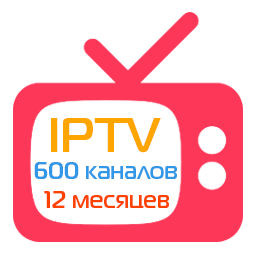
<style>
.page{position:relative;width:256px;height:256px;background:#ffffff}
.page>*{position:absolute;margin:0}
.t1{font:48px "MagistralC-Bold";color:#ffa500}
.t2{font:24px "MagistralC-Bold";color:#3197e6}
.t3{font:24px "MagistralC-Bold";color:#ff4200}
</style>
<div class="page">
<p class="t1" style="left:51px;top:118px;width:110px;height:35px">IPTV</p>
<p class="t2" style="left:34px;top:162px;width:143px;height:17px">600 каналов</p>
<p class="t3" style="left:44px;top:191px;width:125px;height:18px">12 месяцев</p>
</div>
